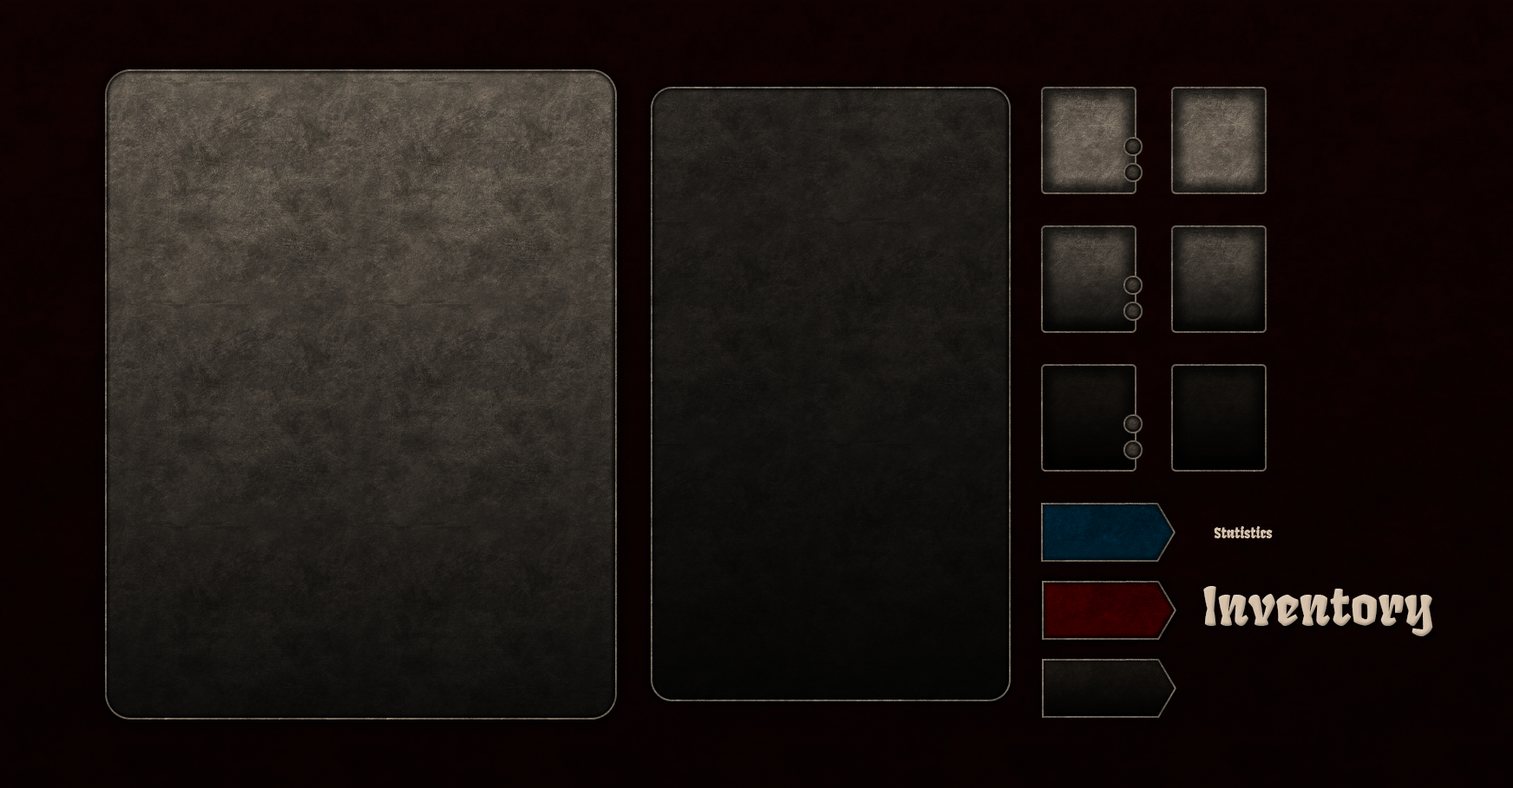
<style>
.page{position:relative;width:1513px;height:788px}
.page>*{position:absolute;margin:0}
.t1{font:13.7px "Fruktur-Regular";color:#d5c1aa}
.t2{font:52px "Fruktur-Regular";color:#d5c1aa}
</style>
<div class="page">
<p class="t1" style="left:1213px;top:526px;width:59px;height:13px">Statistics</p>
<p class="t2" style="left:1203px;top:586px;width:230px;height:51px">Inventory</p>
</div>
